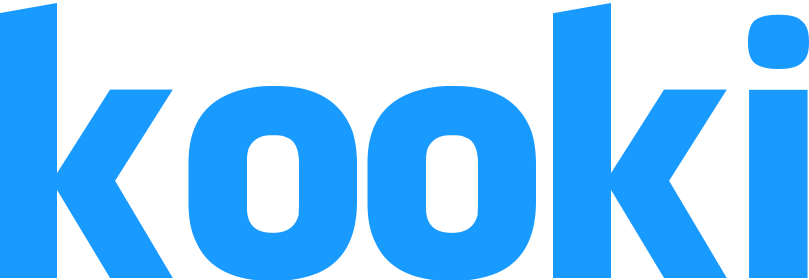
<style>
.page{position:relative;width:809px;height:280px;background:#199aff}
.page>*{position:absolute;margin:0}
.t1{font:354px "FacebookLetterFaces";color:#199aff}
</style>
<div class="page">
<p class="t1" style="left:0px;top:3px;width:809px;height:279px">kooki</p>
</div>
